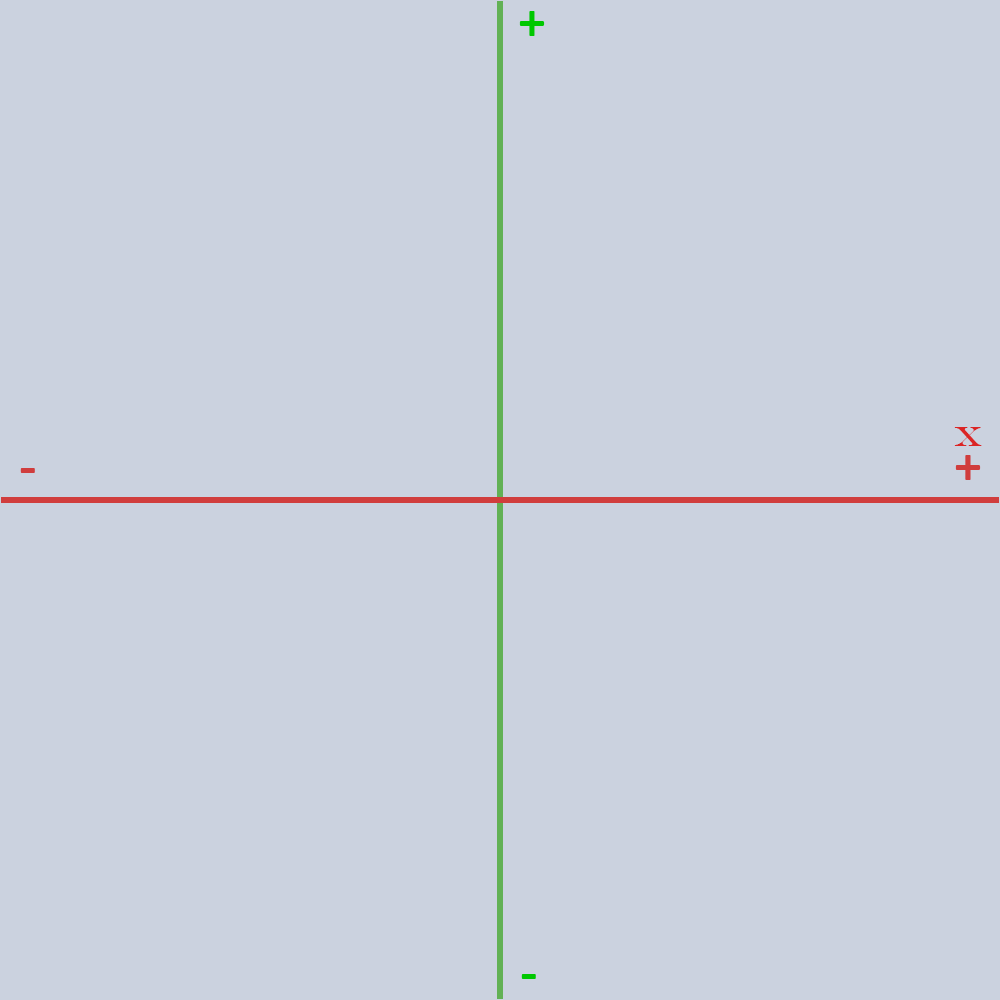
<style>
.page{position:relative;width:1000px;height:1000px;background:#cbd2df}
.page>*{position:absolute;margin:0}
.t1{font:53.3px "Calibri";letter-spacing:0.14em;color:#00c800;font-weight:bold}
.t2{font:28px "EngraversMT";letter-spacing:0.14em;color:#db2525}
.t3{font:53.3px "Calibri";letter-spacing:0.14em;color:#d03d3d;font-weight:bold}
</style>
<div class="page">
<p class="t1" style="left:519px;top:11px;width:26px;height:25px">+</p>
<p class="t2" style="left:954px;top:427px;width:28px;height:19px">x</p>
<p class="t3" style="left:955px;top:455px;width:26px;height:25px">+</p>
<p class="t3" style="left:20px;top:468px;width:15px;height:5px">-</p>
<p class="t1" style="left:521px;top:974px;width:15px;height:5px">-</p>
</div>
